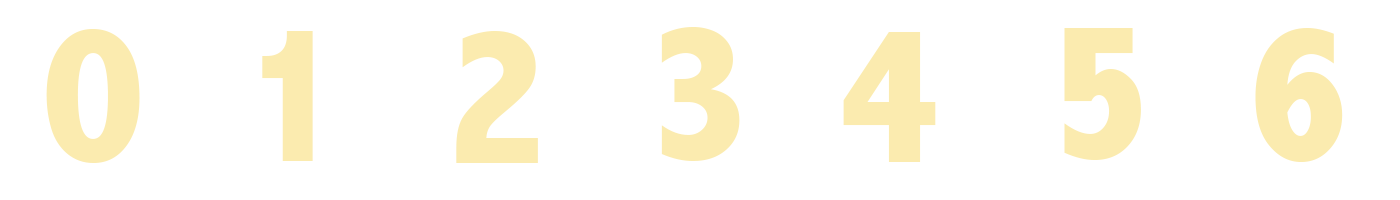
<style>
.page{position:relative;width:1400px;height:200px;background:#ffffff}
.page>*{position:absolute;margin:0}
.t1{font:200px "AbadiMT-CondensedExtraBold";color:#fbebaf}
</style>
<div class="page">
<p class="t1" style="left:46px;top:29px;width:94px;height:134px">0</p>
<p class="t1" style="left:661px;top:27px;width:79px;height:134px">3</p>
<p class="t1" style="left:1064px;top:28px;width:77px;height:132px">5</p>
<p class="t1" style="left:1255px;top:28px;width:88px;height:134px">6</p>
<p class="t1" style="left:262px;top:31px;width:51px;height:130px">1</p>
<p class="t1" style="left:456px;top:31px;width:82px;height:132px">2</p>
<p class="t1" style="left:843px;top:32px;width:93px;height:130px">4</p>
</div>
